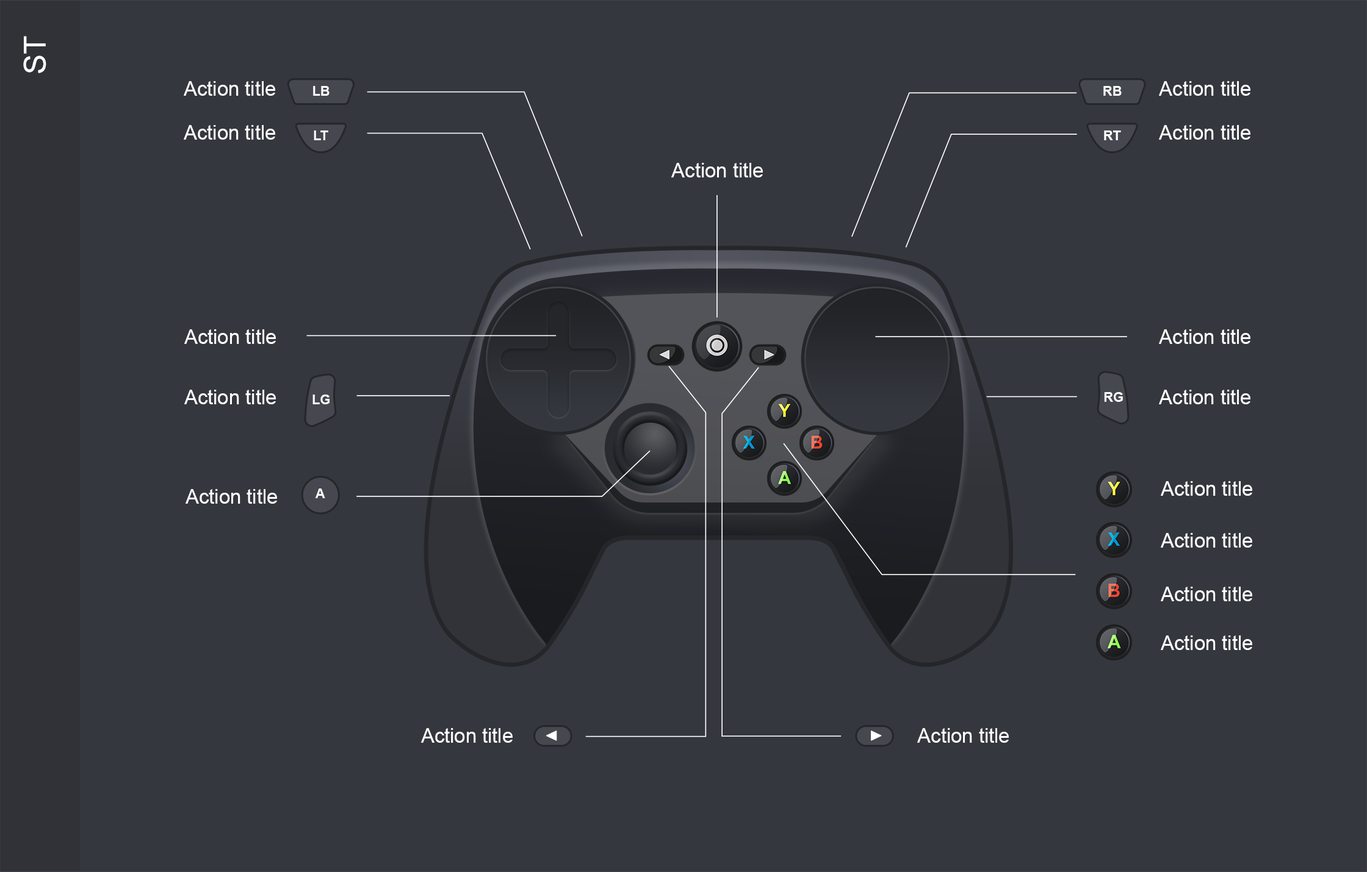
<style>
.page{position:relative;width:1367px;height:872px;background:#35373e}
.page>*{position:absolute;margin:0}
.t1{font:30.5px "ArialMT";color:#ffffff}
.t2{font:20px "ArialMT";color:#ffffff}
.t3{font:13.3px "Arial-BoldMT";color:#ffffff}
</style>
<div class="page">
<p class="t1" style="left:23px;top:36px;width:23px;height:37px;rotate:-90deg">ST</p>
<p class="t2" style="left:184px;top:81px;width:91px;height:15px">Action title</p>
<p class="t3" style="left:313px;top:86px;width:16px;height:10px">LB</p>
<p class="t3" style="left:1103px;top:86px;width:18px;height:10px">RB</p>
<p class="t2" style="left:1159px;top:81px;width:91px;height:15px">Action title</p>
<p class="t2" style="left:184px;top:125px;width:91px;height:15px">Action title</p>
<p class="t2" style="left:1159px;top:125px;width:91px;height:15px">Action title</p>
<p class="t3" style="left:314px;top:131px;width:14px;height:9px">LT</p>
<p class="t3" style="left:1104px;top:131px;width:17px;height:9px">RT</p>
<p class="t2" style="left:671px;top:163px;width:92px;height:15px">Action title</p>
<p class="t2" style="left:184px;top:329px;width:92px;height:15px">Action title</p>
<p class="t2" style="left:1159px;top:329px;width:91px;height:15px">Action title</p>
<p class="t2" style="left:184px;top:390px;width:92px;height:15px">Action title</p>
<p class="t2" style="left:1159px;top:390px;width:91px;height:15px">Action title</p>
<p class="t3" style="left:312px;top:395px;width:17px;height:10px">LG</p>
<p class="t3" style="left:1104px;top:392px;width:19px;height:10px">RG</p>
<p class="t2" style="left:1160px;top:481px;width:92px;height:15px">Action title</p>
<p class="t2" style="left:185px;top:489px;width:92px;height:15px">Action title</p>
<p class="t3" style="left:315px;top:489px;width:10px;height:9px">A</p>
<p class="t2" style="left:1160px;top:533px;width:92px;height:15px">Action title</p>
<p class="t2" style="left:1160px;top:587px;width:92px;height:15px">Action title</p>
<p class="t2" style="left:1160px;top:636px;width:92px;height:14px">Action title</p>
<p class="t2" style="left:421px;top:728px;width:92px;height:15px">Action title</p>
<p class="t2" style="left:917px;top:728px;width:92px;height:15px">Action title</p>
</div>
